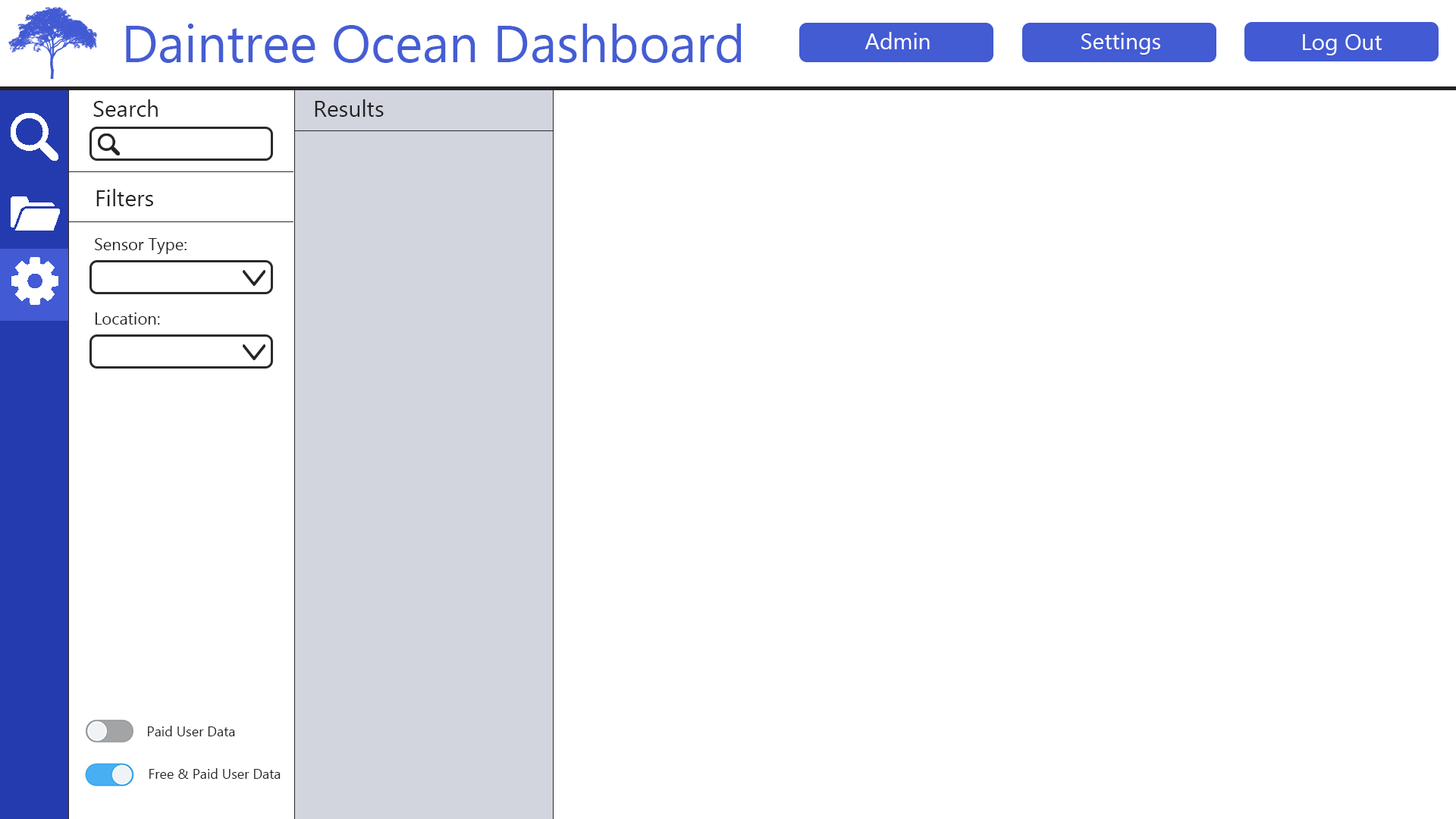
<style>
.page{position:relative;width:1456px;height:819px;background:#ffffff}
.page>*{position:absolute;margin:0}
.t1{font:52.3px "MyanmarText";color:#455dd4}
.t2{font:22.7px "MyanmarText";color:#ffffff}
.t3{font:22.7px "MyanmarText";color:#232323}
.t4{font:16.7px "MyanmarText";color:#232323}
.t5{font:13.6px "MyanmarText";color:#232323}
</style>
<div class="page">
<p class="t1" style="left:126px;top:24px;width:615px;height:39px">Daintree Ocean Dashboard</p>
<p class="t2" style="left:864px;top:32px;width:66px;height:17px">Admin</p>
<p class="t2" style="left:1081px;top:33px;width:79px;height:22px">Settings</p>
<p class="t2" style="left:1303px;top:34px;width:79px;height:21px">Log Out</p>
<p class="t3" style="left:93px;top:99px;width:65px;height:18px">Search</p>
<p class="t3" style="left:315px;top:99px;width:69px;height:18px">Results</p>
<p class="t3" style="left:96px;top:189px;width:57px;height:17px">Filters</p>
<p class="t4" style="left:95px;top:238px;width:92px;height:16px">Sensor Type:</p>
<p class="t4" style="left:95px;top:312px;width:65px;height:13px">Location:</p>
<p class="t5" style="left:148px;top:726px;width:87px;height:10px">Paid User Data</p>
<p class="t5" style="left:149px;top:768px;width:132px;height:11px">Free &amp; Paid User Data</p>
</div>
